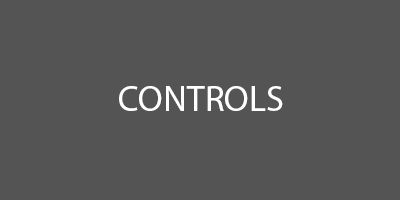
<style>
.page{position:relative;width:400px;height:200px;background:#545454}
.page>*{position:absolute;margin:0}
.t1{font:36px "MyriadPro-Regular";color:#ffffff}
</style>
<div class="page">
<p class="t1" style="left:119px;top:86px;width:164px;height:25px">CONTROLS</p>
</div>
